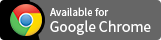
<style>
.page{position:relative;width:161px;height:40px;background:#666666}
.page>*{position:absolute;margin:0}
.t1{font:10px "NotoSansCJKtc-Regular";color:#ffffff}
.t2{font:14px "NotoSansCJKtc-Regular";color:#ffffff}
</style>
<div class="page">
<p class="t1" style="left:50px;top:7px;width:59px;height:9px">Available for</p>
<p class="t2" style="left:50px;top:20px;width:101px;height:15px">Google Chrome</p>
</div>
